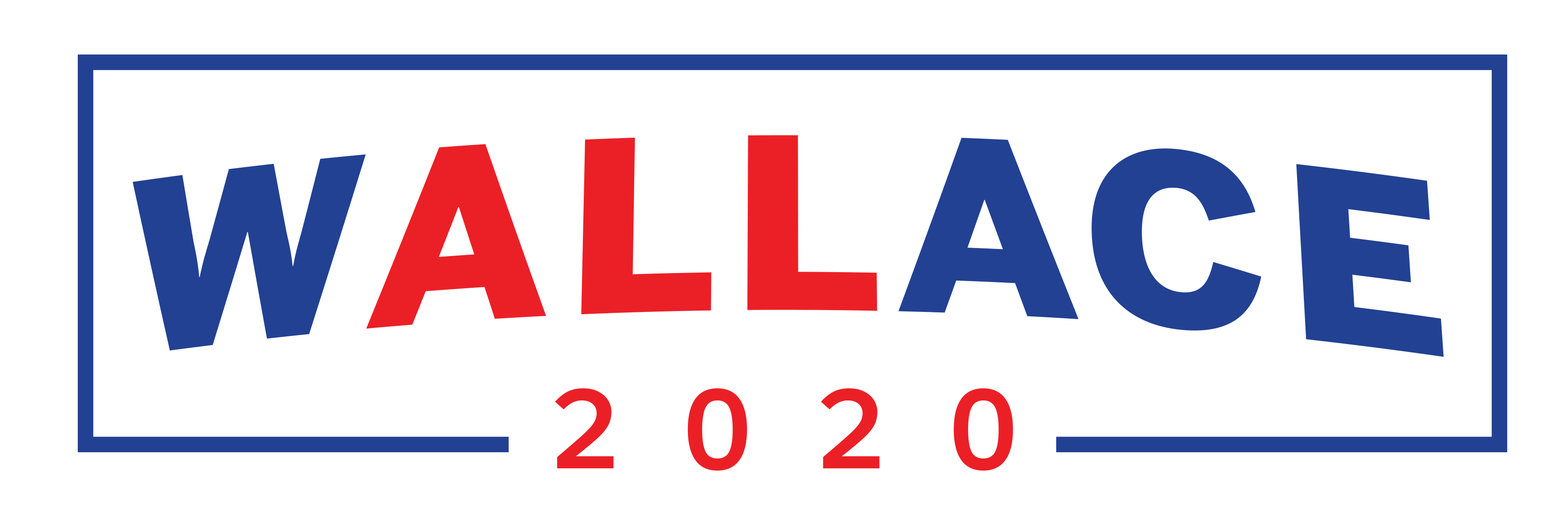
<style>
.page{position:relative;width:1568px;height:530px;background:#ffffff}
.page>*{position:absolute;margin:0}
.t1{font:240.3px "BentonSans-Black";letter-spacing:0.06em;color:#eb2026}
.t2{font:240.3px "BentonSans-Black";letter-spacing:0.06em;color:#224192}
.t3{font:109.9px "SalesforceSans-Bold";letter-spacing:0.6em;color:#eb2026}
</style>
<div class="page">
<p class="t1" style="left:132px;top:135px;width:1312px;height:222px"><span class="t2">W</span>ALL<span class="t2">ACE</span></p>
<p class="t3" style="left:555px;top:388px;width:458px;height:83px">2020</p>
</div>
